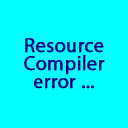
<style>
.page{position:relative;width:128px;height:128px;background:#00ffff}
.page>*{position:absolute;margin:0}
.t1{font:20px/18px "MyriadPro-Regular";color:#000484;font-weight:bold}
</style>
<div class="page">
<p class="t1" style="left:24px;top:38px;width:81px;height:51px;text-align:center">Resource<br>Compiler<br>error ...</p>
</div>
